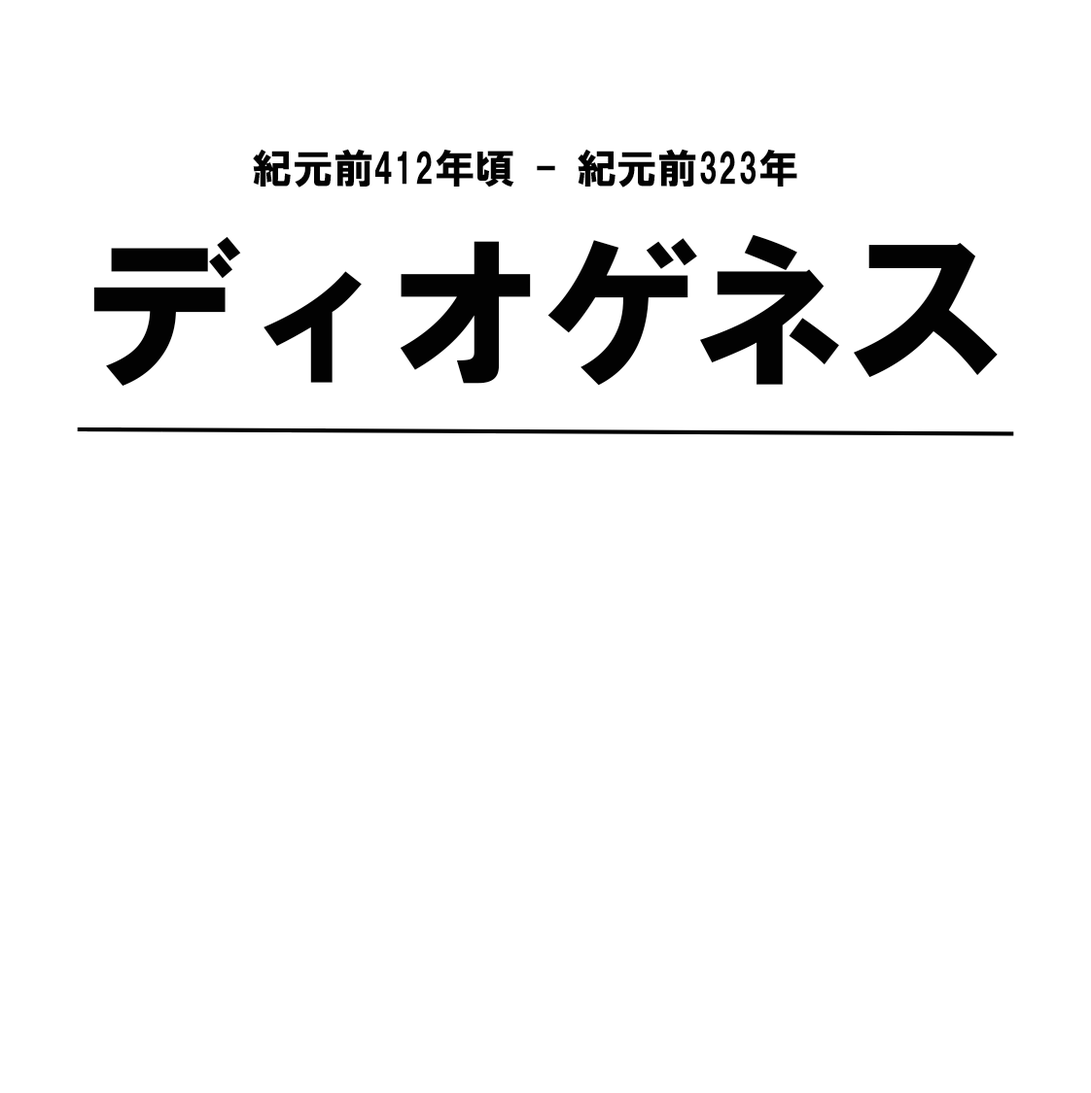
<style>
.page{position:relative;width:1091px;height:1093px;background:#ffffff}
.page>*{position:absolute;margin:0}
.t1{font:40.5px "HGSoeiKakugothicUB";color:#020202}
.t2{font:170.1px "HGSoeiKakugothicUB";letter-spacing:-0.1em;color:#020202}
</style>
<div class="page">
<p class="t1" style="left:253px;top:149px;width:544px;height:39px">紀元前412年頃 - 紀元前323年</p>
<p class="t2" style="left:93px;top:234px;width:904px;height:152px">ディオゲネス</p>
</div>
